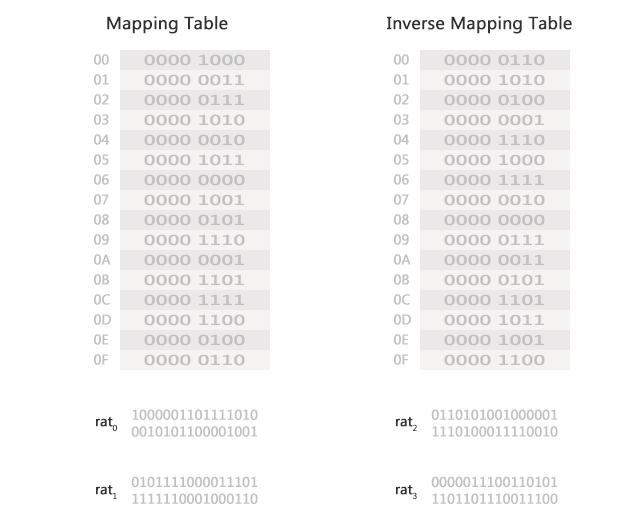
<style>
.page{position:relative;width:640px;height:530px;background:#ffffff}
.page>*{position:absolute;margin:0}
.t1{font:30px "LaoUI";color:#313131;font-weight:bold}
.t2{font:14px/20px "LaoUI";color:#c0c0c0;font-weight:bold}
.t3{font:14px/20px "LaoUI";color:#c0c0c0;font-weight:bold;scale:1.5 1}
.t4{font:14px "LaoUI";color:#c0c0c0;font-weight:bold}
.t5{font:14px "LaoUI";color:#313131;font-weight:bold}
</style>
<div class="page">
<p class="t1" style="left:107px;top:16px;width:121px;height:18px">Mapping Table</p>
<p class="t1" style="left:387px;top:16px;width:185px;height:18px">Inverse Mapping Table</p>
<p class="t2" style="left:94px;top:54px;width:17px;height:311px">00<br>01<br>02<br>03<br>04<br>05<br>06<br>07<br>08<br>09<br>0A<br>0B<br>0C<br>0D<br>0E<br>0F</p>
<p class="t3" style="left:144px;top:54px;width:101px;height:312px">0000 1000<br>0000 0011<br>0000 0111<br>0000 1010<br>0000 0010<br>0000 1011<br>0000 0000<br>0000 1001<br>0000 0101<br>0000 1110<br>0000 0001<br>0000 1101<br>0000 1111<br>0000 1100<br>0000 0100<br>0000 0110</p>
<p class="t2" style="left:394px;top:54px;width:17px;height:311px">00<br>01<br>02<br>03<br>04<br>05<br>06<br>07<br>08<br>09<br>0A<br>0B<br>0C<br>0D<br>0E<br>0F</p>
<p class="t3" style="left:444px;top:54px;width:101px;height:312px">0000 0110<br>0000 1010<br>0000 0100<br>0000 0001<br>0000 1110<br>0000 1000<br>0000 1111<br>0000 0010<br>0000 0000<br>0000 0111<br>0000 0011<br>0000 0101<br>0000 1101<br>0000 1011<br>0000 1001<br>0000 1100</p>
<p class="t4" style="left:131px;top:409px;width:127px;height:95px">1000001101111010<br>0010101100001001<br><br><br>0101111000011101<br>1111110001000110</p>
<p class="t4" style="left:431px;top:409px;width:127px;height:95px">0110101001000001<br>1110100011110010<br><br><br>0000011100110101<br>1101101110011100</p>
<p class="t5" style="left:96px;top:417px;width:21px;height:14px">rat0</p>
<p class="t5" style="left:396px;top:417px;width:21px;height:14px">rat2</p>
<p class="t5" style="left:96px;top:485px;width:21px;height:14px">rat1</p>
<p class="t5" style="left:396px;top:485px;width:21px;height:14px">rat3</p>
</div>
